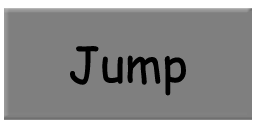
<style>
.page{position:relative;width:256px;height:128px;background:#7f7f7f}
.page>*{position:absolute;margin:0}
.t1{font:48px "ComicSansMS";color:#000000}
</style>
<div class="page">
<p class="t1" style="left:70px;top:46px;width:116px;height:50px">Jump</p>
</div>
